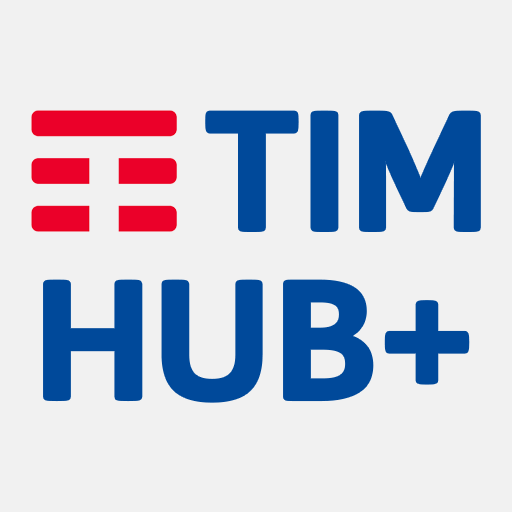
<style>
.page{position:relative;width:512px;height:512px;background:#f1f1f1}
.page>*{position:absolute;margin:0}
.t1{font:280px "TIMSans-Bold";color:#00499a}
</style>
<div class="page">
<p class="t1" style="left:207px;top:112px;width:272px;height:118px">TIM</p>
<p class="t1" style="left:45px;top:281px;width:423px;height:120px">HUB+</p>
</div>
